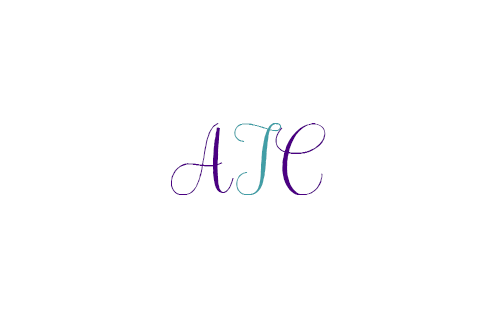
<style>
.page{position:relative;width:500px;height:326px;background:#ffffff}
.page>*{position:absolute;margin:0}
.t1{font:83.3px "Balqis";letter-spacing:0.05em;color:#4b0082}
.t2{font:83.3px "Balqis";letter-spacing:0.05em;color:#429ea6}
</style>
<div class="page">
<p class="t1" style="left:171px;top:123px;width:155px;height:72px">A<span class="t2">J</span>C</p>
</div>
